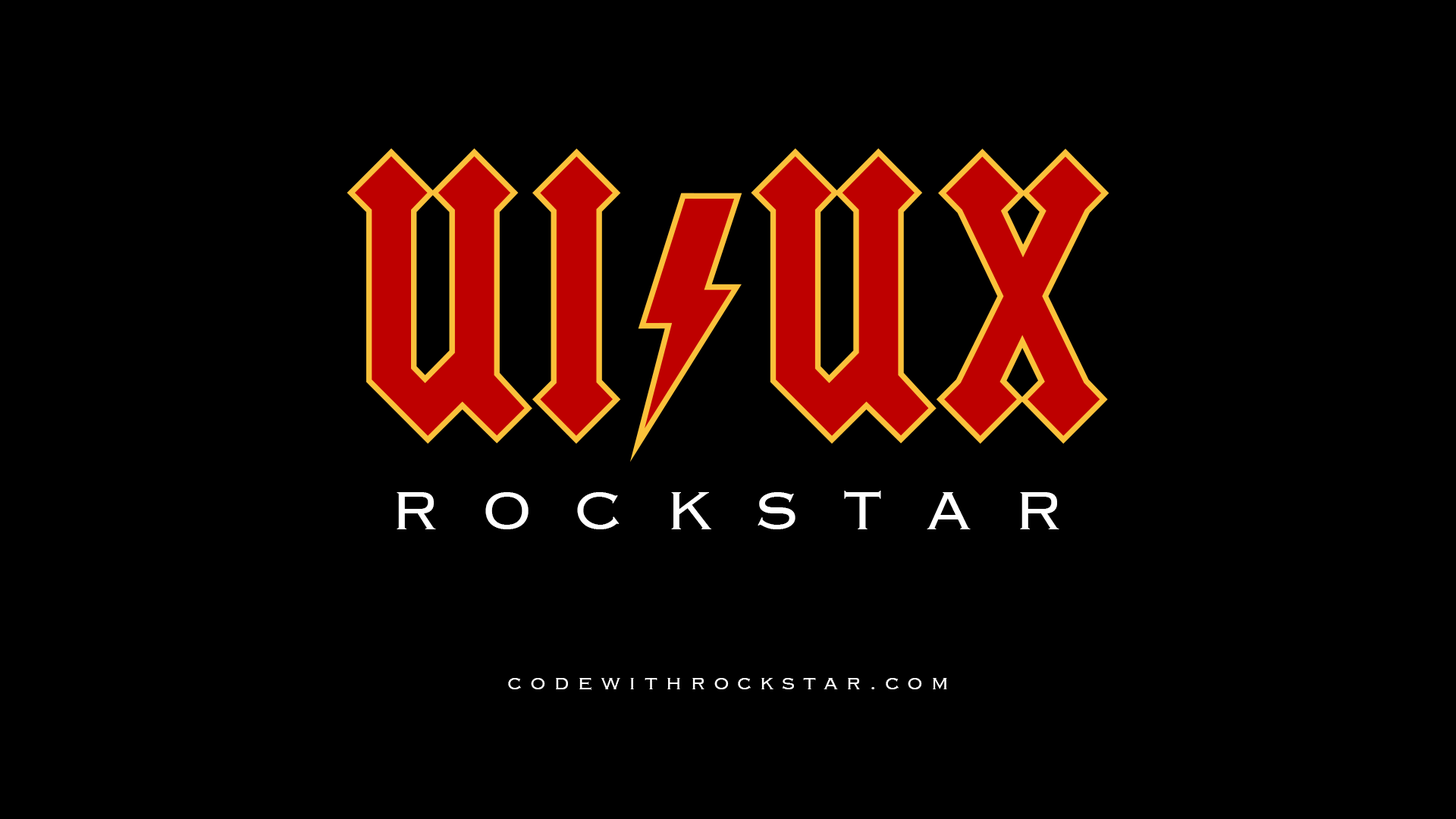
<style>
.page{position:relative;width:1456px;height:819px;background:#000000}
.page>*{position:absolute;margin:0}
.t1{font:70.5px "Copperplate-Light";letter-spacing:0.58em;color:#ffffff}
.t2{font:25.8px "Copperplate-Light";letter-spacing:0.3em;color:#ffffff}
</style>
<div class="page">
<p class="t1" style="left:397px;top:491px;width:662px;height:38px">ROCKSTAR</p>
<p class="t2" style="left:508px;top:678px;width:439px;height:12px">codewithrockstar.com</p>
</div>
